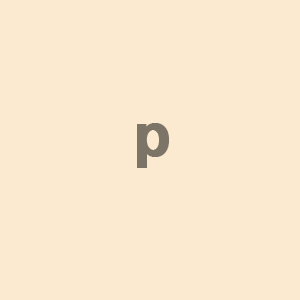
<style>
.page{position:relative;width:300px;height:300px;background:#fbe9d0}
.page>*{position:absolute;margin:0}
.t1{font:60px "Arial-BoldMT";color:#7d7468;font-weight:bold}
</style>
<div class="page">
<p class="t1" style="left:137px;top:123px;width:32px;height:45px">p</p>
</div>
